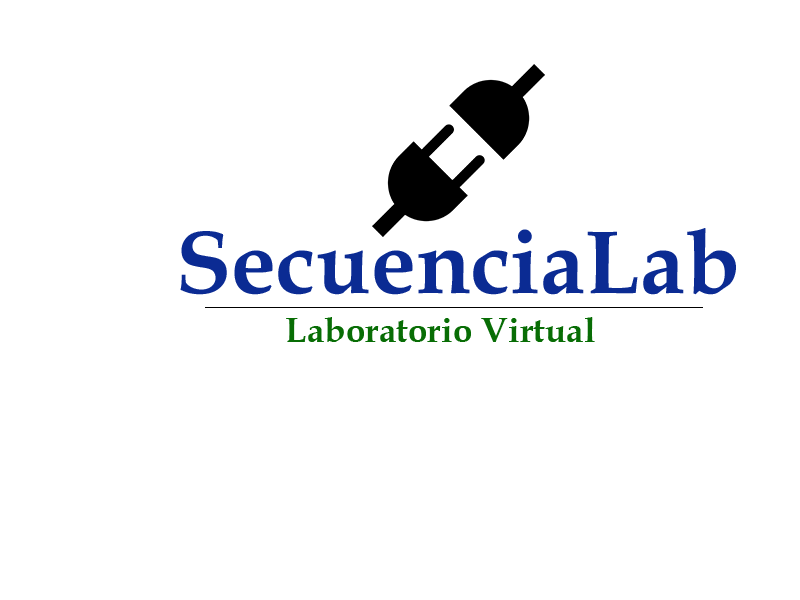
<style>
.page{position:relative;width:800px;height:600px;background:#ffffff}
.page>*{position:absolute;margin:0}
.t1{font:90px "BookAntiqua-Bold";color:#0b2b93}
.t2{font:35px "BookAntiqua-Bold";color:#086d05}
</style>
<div class="page">
<p class="t1" style="left:180px;top:228px;width:556px;height:67px">SecuenciaLab</p>
<p class="t2" style="left:286px;top:317px;width:309px;height:25px">Laboratorio Virtual</p>
</div>
